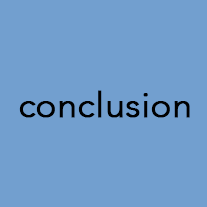
<style>
.page{position:relative;width:207px;height:207px;background:#729fcf}
.page>*{position:absolute;margin:0}
.t1{font:35px "Avenir-Light";color:#000000;font-weight:bold}
</style>
<div class="page">
<p class="t1" style="left:19px;top:90px;width:171px;height:28px">conclusion</p>
</div>
